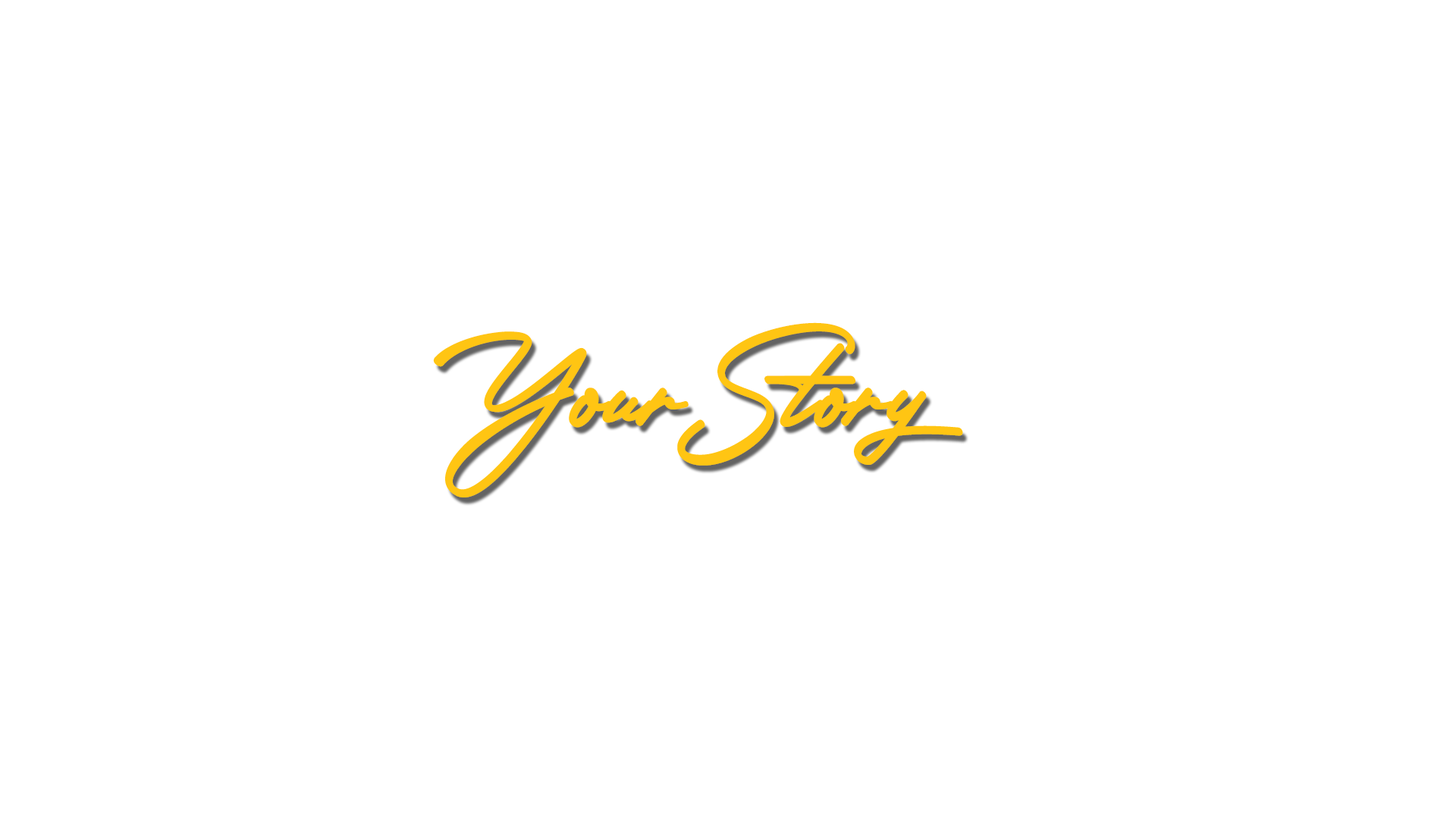
<style>
.page{position:relative;width:1456px;height:819px;background:#ffffff}
.page>*{position:absolute;margin:0}
.t1{font:130.4px "PhotographSignature";color:#ffc513;font-weight:bold;font-style:italic}
</style>
<div class="page">
<p class="t1" style="left:433px;top:322px;width:530px;height:175px">YourStory</p>
</div>
